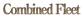
<style>
.page{position:relative;width:83px;height:18px;background:#ffffff}
.page>*{position:absolute;margin:0}
.t1{font:14px "RyuminPro-ExBold";letter-spacing:-0.12em;color:#7e6b55;font-weight:bold;scale:0.9 1}
</style>
<div class="page">
<p class="t1" style="left:3px;top:3px;width:78px;height:12px">Combined Fleet</p>
</div>
